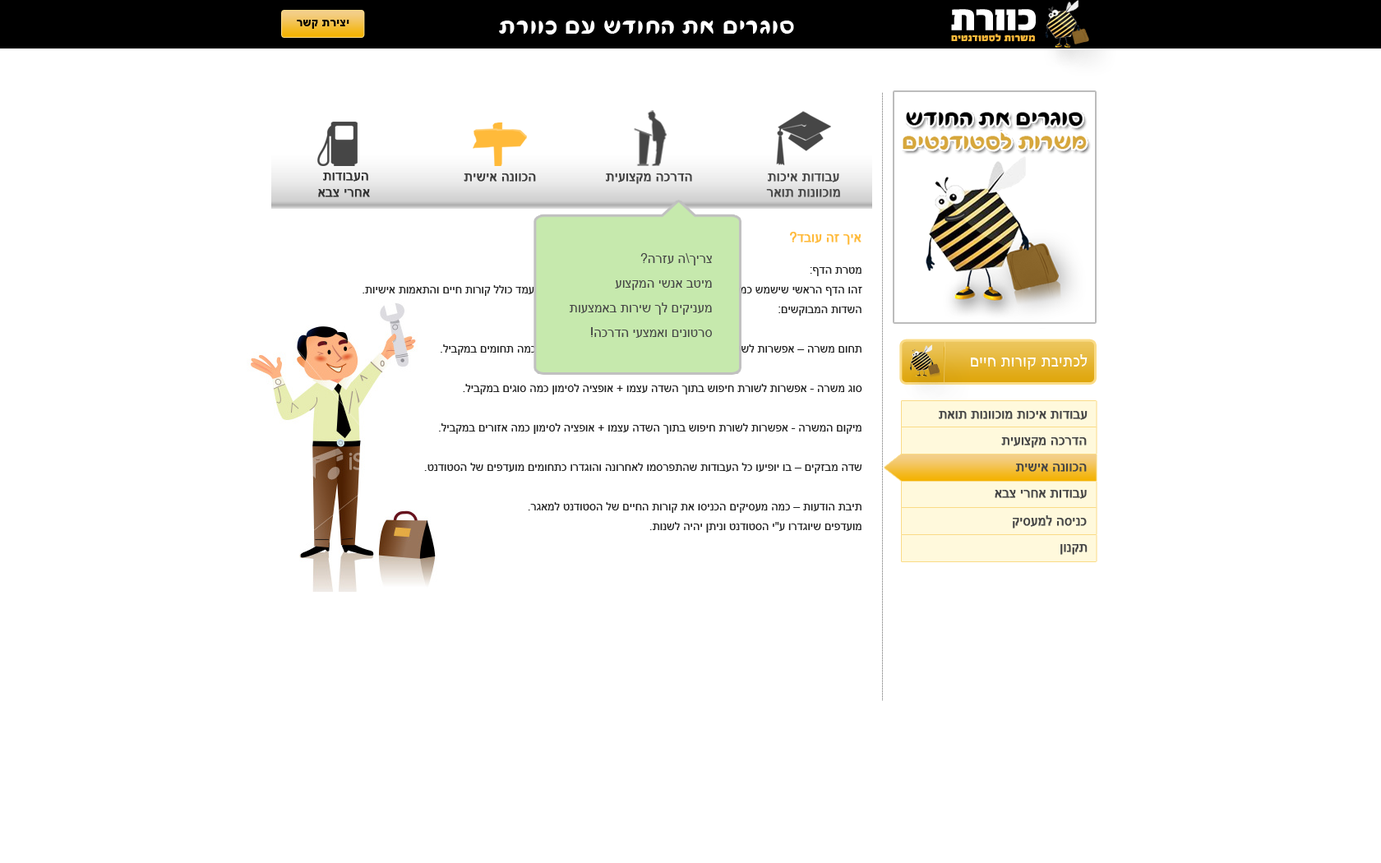
<style>
.page{position:relative;width:1381px;height:863px;background:#ffffff}
.page>*{position:absolute;margin:0}
.t1{font:11.5px "Arial-BoldMT";letter-spacing:0.03em;color:#000000}
.t2{font:28.8px "FbFlamingo-Regular";letter-spacing:0.03em;color:#ffffff}
.t3{font:9.9px "FbAdrenalin-Black";letter-spacing:0.03em;color:#ffba3a}
.t4{font:13.2px "ArialMT";color:#333333;font-weight:bold}
.t5{font:13.2px "ArialMT";color:#3c3c3c;font-weight:bold}
.t6{font:13.2px "ArialMT";color:#414141;font-weight:bold}
.t7{font:13.2px "ArialMT";color:#484848;font-weight:bold}
.t8{font:12.9px "ArialMT";color:#ffba3a;font-weight:bold}
.t9{font:13.2px/24.7px "ArialMT";color:#464646}
.t10{font:11.5px/19.7px "ArialMT";color:#232323}
.t11{font:16.4px "FbConcept-Regular";letter-spacing:0.03em;color:#ffffff}
.t12{font:12.9px "ArialMT";color:#464646;font-weight:bold}
</style>
<div class="page">
<p class="t1" style="left:297px;top:20px;width:52px;height:9px">רשק תריצי</p>
<p class="t2" style="left:499px;top:21px;width:295px;height:14px">תרווכ םע שדוחה תא םירגוס</p>
<p class="t3" style="left:951px;top:34px;width:84px;height:8px">םיטנדוטסל תורשמ</p>
<p class="t4" style="left:318px;top:173px;width:52px;height:24px;text-align:center">תודובעה<br>אבצ ירחא</p>
<p class="t5" style="left:464px;top:173px;width:72px;height:9px">תישיא הנווכה</p>
<p class="t6" style="left:606px;top:173px;width:86px;height:11px">תיעוצקמ הכרדה</p>
<p class="t7" style="left:766px;top:173px;width:74px;height:24px;text-align:center">תוכיא תודובע<br>ראות תונווכומ</p>
<p class="t8" style="left:790px;top:232px;width:72px;height:13px">?דבוע הז ךיא</p>
<p class="t9" style="left:569px;top:253px;width:143px;height:85px">?הרזע ה\ךירצ<br> עוצקמה ישנא בטימ<br> תועצמאב תוריש ךל םיקינעמ<br>!הכרדה יעצמאו םינוטרס</p>
<p class="t10" style="left:363px;top:267px;width:499px;height:266px">:ףדה תרטמ<br>.תוישיא תומאתהו םייח תורוק ללוכ דמעומה עדימ לכ תא ליכי הז ךד .תודובע שופיח עונמכ שמשיש ישארה ףדה והז<br>:םישקובמה תודשה<br><br>.ליבקמב םימוחת המכ ןומיסל היצפוא + ומצע הדשה ךותב שופיח תרושל תורשפא – הרשמ םוחת<br><br>.ליבקמב םיגוס המכ ןומיסל היצפוא + ומצע הדשה ךותב שופיח תרושל תורשפא - הרשמ גוס<br><br>.ליבקמב םירוזא המכ ןומיסל היצפוא + ומצע הדשה ךותב שופיח תרושל תורשפא - הרשמה םוקימ<br><br>.טנדוטסה לש םיפדעומ םימוחתכ ורדגוהו הנורחאל ומסרפתהש תודובעה לכ ועיפוי וב – םיקזבמ הדש<br><br>.רגאמל טנדוטסה לש םייחה תורוק תא וסינכה םיקיסעמ המכ – תועדוה תבית<br>.תונשל היהי ןתינו טנדוטסה י"ע ורדגויש םיפדעומ</p>
<p class="t11" style="left:971px;top:354px;width:117px;height:16px">םייח תורוק תביתכל</p>
<p class="t12" style="left:939px;top:411px;width:149px;height:9px">תאות תונווכומ תוכיא תודובע</p>
<p class="t12" style="left:1001px;top:437px;width:86px;height:11px">תיעוצקמ הכרדה</p>
<p class="t12" style="left:1015px;top:464px;width:72px;height:8px">תישיא הנווכה</p>
<p class="t12" style="left:995px;top:490px;width:92px;height:9px">אבצ ירחא תודובע</p>
<p class="t12" style="left:1013px;top:516px;width:74px;height:13px">קיסעמל הסינכ</p>
<p class="t12" style="left:1061px;top:544px;width:27px;height:11px">ןונקת</p>
</div>
